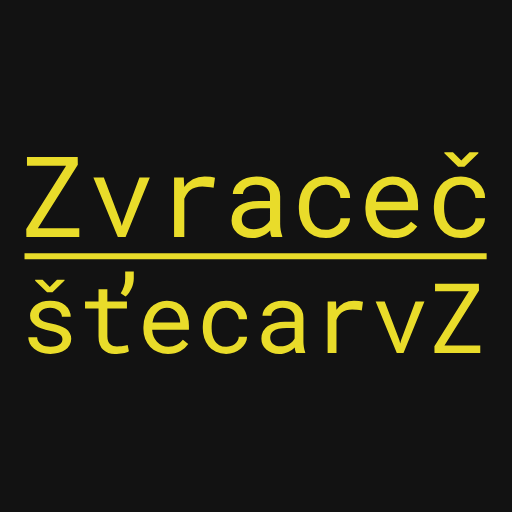
<style>
.page{position:relative;width:512px;height:512px;background:#121212}
.page>*{position:absolute;margin:0}
.t1{font:97.3px "RobotoMono-Regular";color:#e9dc2a}
.t2{font:112.6px "RobotoMono-Regular";color:#e9dc2a}
</style>
<div class="page">
<p class="t1" style="left:26px;top:152px;width:460px;height:202px"><span class="t2">Zvraceč<br></span>šťecarvZ</p>
</div>
